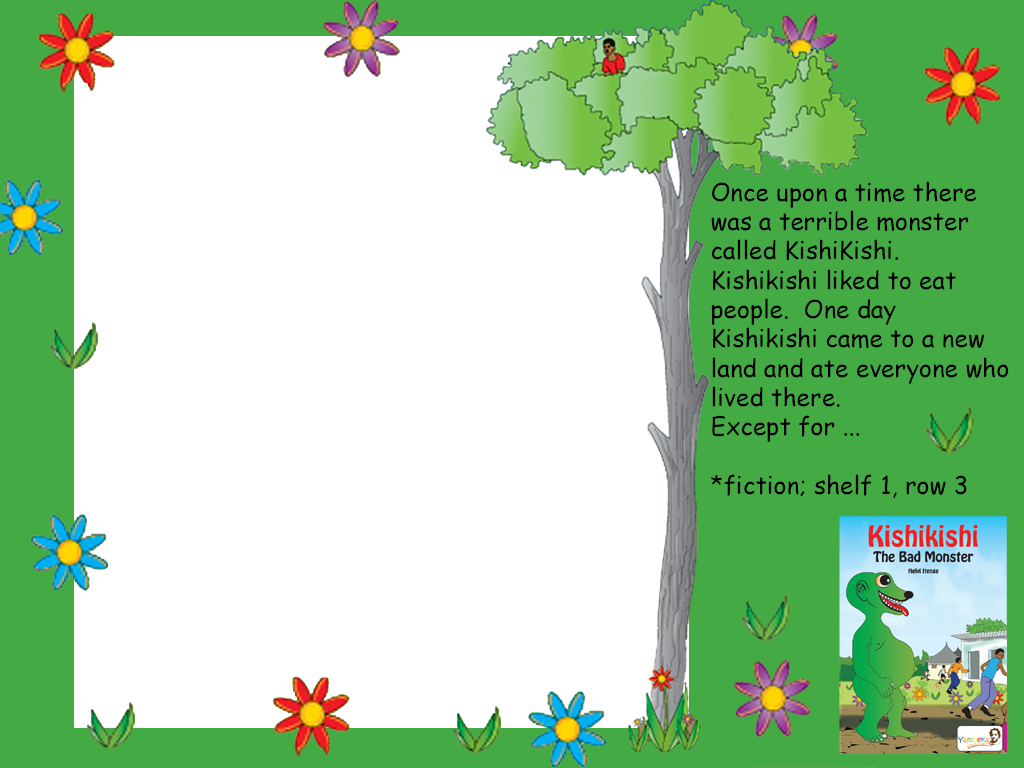
<style>
.page{position:relative;width:1024px;height:768px;background:#ffffff}
.page>*{position:absolute;margin:0}
.t1{font:24.4px "ComicSansMS";color:#000000}
</style>
<div class="page">
<p class="t1" style="left:711px;top:181px;width:298px;height:317px">Once upon a time there <br>was a terrible monster<br>called KishiKishi.  <br>Kishikishi liked to eat<br>people.  One day<br>Kishikishi came to a new<br>land and ate everyone who<br>lived there.<br>Except for ...<br><br>*fiction; shelf 1, row 3</p>
</div>
